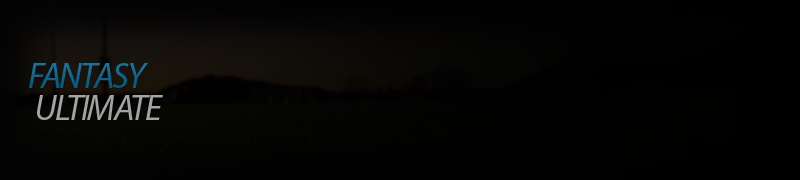
<style>
.page{position:relative;width:800px;height:180px}
.page>*{position:absolute;margin:0}
.t1{font:36px "MyriadPro-It";letter-spacing:-0.05em;color:#006591;text-transform:uppercase}
.t2{font:36px "MyriadPro-It";letter-spacing:-0.05em;color:#a3a3a3;text-transform:uppercase}
</style>
<div class="page">
<p class="t1" style="left:29px;top:63px;width:119px;height:25px">Fantasy</p>
<p class="t2" style="left:37px;top:95px;width:126px;height:25px">Ultimate</p>
</div>
